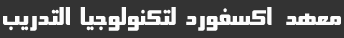
<style>
.page{position:relative;width:344px;height:38px;background:#333333}
.page>*{position:absolute;margin:0}
.t1{font:23.7px "K-Sina";color:#fcfcfc;scale:0.91 1}
</style>
<div class="page">
<p class="t1" style="left:3px;top:7px;width:338px;height:24px">معهد   اكسفورد  لتكنولوجيا  التدريب</p>
</div>
